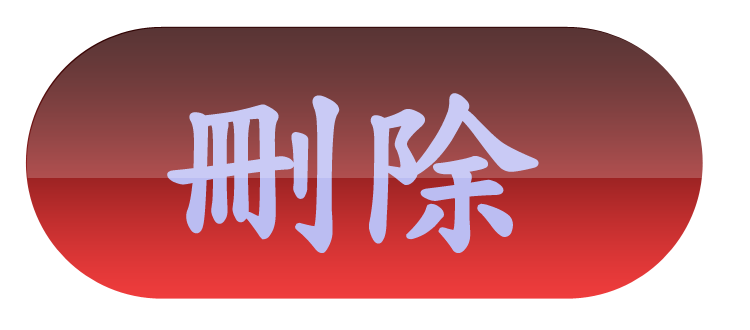
<style>
.page{position:relative;width:750px;height:330px;background:#ffffff}
.page>*{position:absolute;margin:0}
.t1{font:187.5px "DFKaiShu-SB-Estd-BF";color:#bbbdf2;font-weight:bold}
</style>
<div class="page">
<p class="t1" style="left:167px;top:93px;width:372px;height:160px">刪除</p>
</div>
